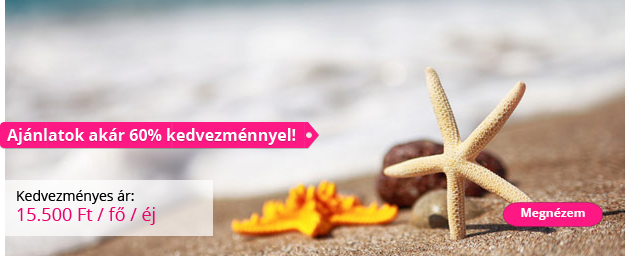
<style>
.page{position:relative;width:625px;height:256px}
.page>*{position:absolute;margin:0}
.t1{font:16px "OpenSans-Bold";color:#ffffff}
.t2{font:18px/20px "OpenSans";color:#ec006e}
.t3{font:14px/20px "OpenSans";color:#000000}
</style>
<div class="page">
<p class="t1" style="left:7px;top:128px;width:289px;height:17px">Ajánlatok akár 60% kedvezménnyel!</p>
<p class="t2" style="left:17px;top:190px;width:138px;height:35px"><span class="t3">Kedvezményes ár: <br></span>15.500 Ft / fő / éj</p>
</div>
